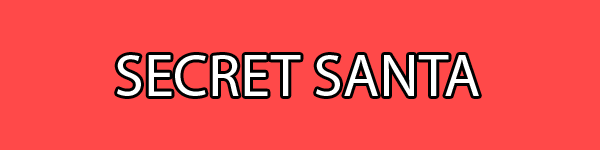
<style>
.page{position:relative;width:600px;height:150px;background:#ff4949}
.page>*{position:absolute;margin:0}
.t1{font:60px "MyriadPro-Regular";color:#ffffff}
</style>
<div class="page">
<p class="t1" style="left:117px;top:55px;width:362px;height:41px">SECRET SANTA</p>
</div>
